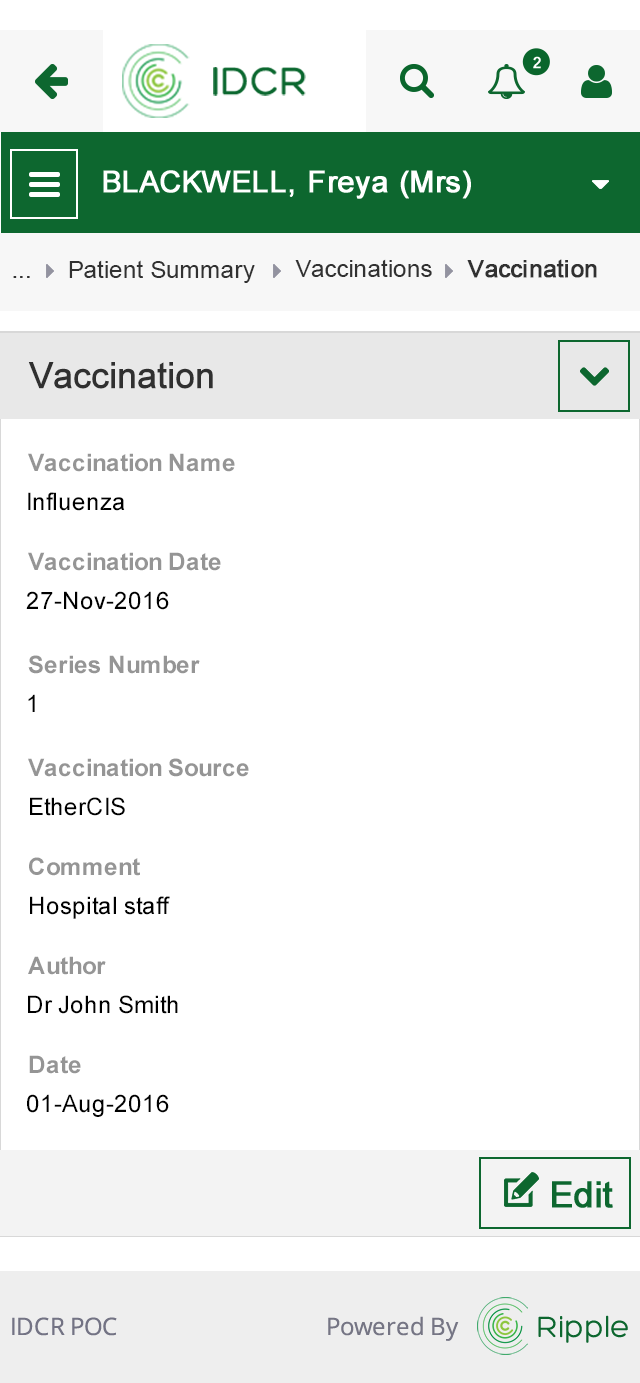
<style>
.page{position:relative;width:640px;height:1383px;background:#ffffff}
.page>*{position:absolute;margin:0}
.t1{font:24px "ArialMT";color:#313131}
.t2{font:24px "ArialMT";color:#313131;font-weight:bold}
.t3{font:36px "ArialMT";color:#303030;font-weight:bold}
.t4{font:24px "Arial-BoldMT";color:#959595}
.t5{font:24px "ArialMT";color:#000000}
</style>
<div class="page">
<p class="t1" style="left:69px;top:260px;width:186px;height:23px">Patient Summary</p>
<p class="t1" style="left:295px;top:259px;width:137px;height:18px">Vaccinations</p>
<p class="t2" style="left:467px;top:259px;width:130px;height:19px">Vaccination</p>
<p class="t1" style="left:13px;top:276px;width:17px;height:2px">...</p>
<p class="t3" style="left:28px;top:362px;width:185px;height:27px">Vaccination</p>
<p class="t4" style="left:28px;top:453px;width:207px;height:19px">Vaccination Name</p>
<p class="t5" style="left:28px;top:492px;width:97px;height:19px">Influenza</p>
<p class="t4" style="left:28px;top:552px;width:193px;height:19px">Vaccination Date</p>
<p class="t5" style="left:26px;top:591px;width:143px;height:19px">27-Nov-2016</p>
<p class="t4" style="left:28px;top:655px;width:172px;height:19px">Series Number</p>
<p class="t5" style="left:28px;top:694px;width:7px;height:18px">1</p>
<p class="t4" style="left:28px;top:758px;width:221px;height:19px">Vaccination Source</p>
<p class="t5" style="left:30px;top:797px;width:95px;height:19px">EtherCIS</p>
<p class="t4" style="left:29px;top:857px;width:111px;height:19px">Comment</p>
<p class="t5" style="left:30px;top:896px;width:140px;height:23px">Hospital staff</p>
<p class="t4" style="left:28px;top:956px;width:78px;height:19px">Author</p>
<p class="t5" style="left:28px;top:995px;width:150px;height:19px">Dr John Smith</p>
<p class="t4" style="left:29px;top:1055px;width:52px;height:19px">Date</p>
<p class="t5" style="left:27px;top:1094px;width:142px;height:23px">01-Aug-2016</p>
</div>
